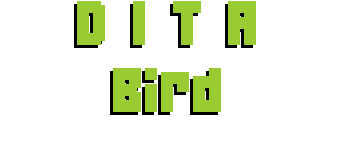
<style>
.page{position:relative;width:351px;height:145px;background:#ffffff}
.page>*{position:absolute;margin:0}
.t1{font:56px "04b19";color:#99cc33}
</style>
<div class="page">
<p class="t1" style="left:74px;top:4px;width:179px;height:111px;text-align:center">D I T A<br>Bird</p>
<p class="t1" style="left:77px;top:1px;width:179px;height:111px;text-align:center">D I T A<br>Bird</p>
</div>
